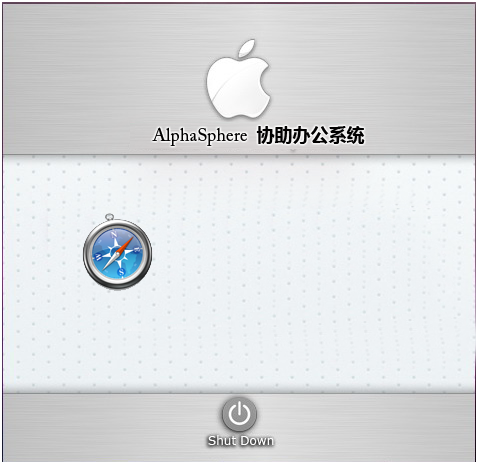
<style>
.page{position:relative;width:478px;height:465px}
.page>*{position:absolute;margin:0}
.t1{font:18px "ACaslonPro-Regular";color:#010000}
.t2{font:18px "MicrosoftYaHei";color:#010000}
</style>
<div class="page">
<p class="t1" style="left:152px;top:126px;width:213px;height:20px">AlphaSphere  <span class="t2">协助办公系统</span></p>
</div>
